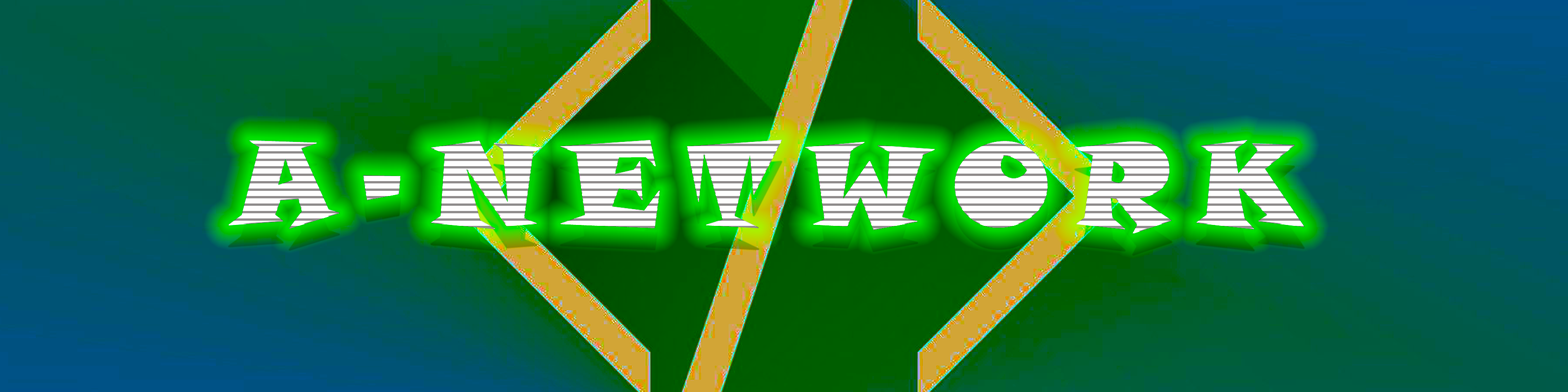
<style>
.page{position:relative;width:1568px;height:392px}
.page>*{position:absolute;margin:0}
.t1{font:116.7px "SnapITC-Regular";letter-spacing:0.2em;color:#ffffff;font-weight:bold}
</style>
<div class="page">
<p class="t1" style="left:228px;top:140px;width:1076px;height:94px">A-NETWORK</p>
</div>
